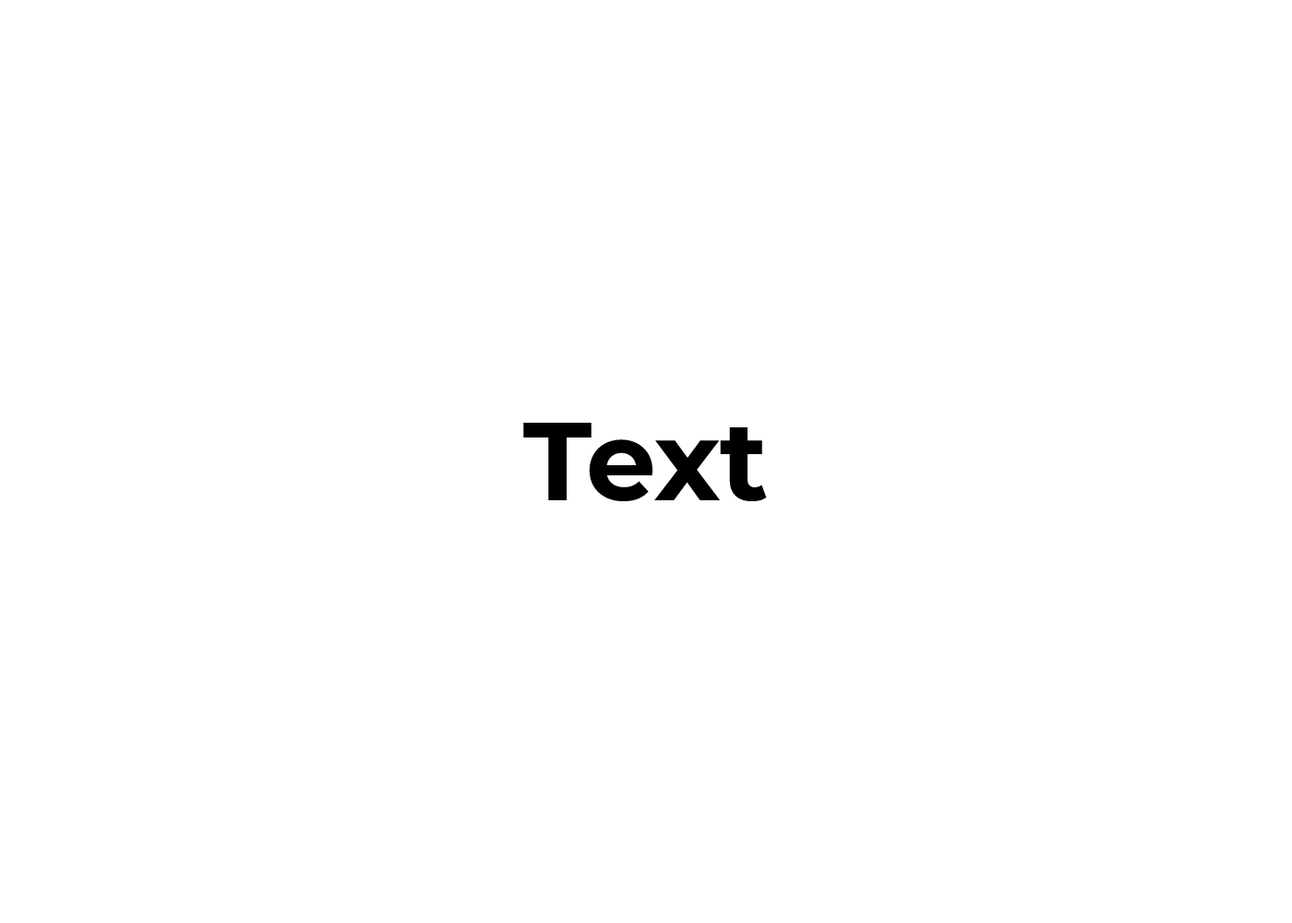
<style>
.page{position:relative;width:1292px;height:923px;background:#ffffff}
.page>*{position:absolute;margin:0}
.t1{font:110.7px "Montserrat-Bold";color:#000000}
</style>
<div class="page">
<p class="t1" style="left:523px;top:423px;width:244px;height:78px">Text</p>
</div>
